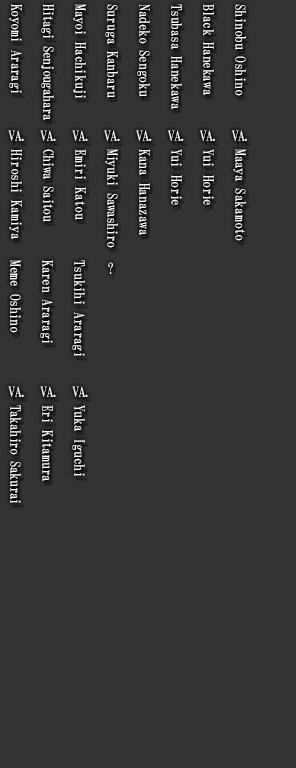
<style>
.page{position:relative;width:296px;height:768px;background:#333333}
.page>*{position:absolute;margin:0}
.t1{font:14px/32px "HGMinchoB";letter-spacing:-0.025em;color:#ffffff}
.t2{font:14px/32px "HGMinchoB";letter-spacing:-0.05em;color:#ffffff}
.t3{font:14px/44px "HGMinchoB";letter-spacing:-0.05em;color:#ffffff}
.t4{font:14px "HGMinchoB";letter-spacing:-0.05em;color:#ffffff}
.t5{font:14px/32px "HGMinchoB";letter-spacing:-0.045em;color:#ffffff}
</style>
<div class="page">
<p class="t1" style="left:9px;top:4px;width:237px;height:116px;rotate:90deg">Shinobu Oshino<br>Black Hanekawa<br>Tsubasa Hanekawa<br>Nadeko Sengoku<br>Suruga Kanbaru<br>Mayoi Hachikuji<br><span class="t2">Hitagi Senjougahara<br></span>Koyomi Araragi</p>
<p class="t3" style="left:8px;top:130px;width:239px;height:144px">VA. VA. VA. VA. VA. VA. VA. VA.<br><br>   <br>                ?</p>
<p class="t1" style="left:9px;top:149px;width:237px;height:99px;rotate:90deg">Maaya Sakamoto<br>Yui Horie<br>Yui Horie<br>Kana Hanazawa<br><span class="t2">Miyuki Sawashiro<br></span>Emiri Katou<br><span class="t2">Chiwa Saitou<br></span>Hiroshi Kamiya</p>
<p class="t1" style="left:10px;top:260px;width:75px;height:96px;rotate:90deg">Tsukihi Araragi<br>Karen Araragi<br>Meme Oshino</p>
<p class="t4" style="left:8px;top:386px;width:80px;height:11px">VA. VA. VA.</p>
<p class="t1" style="left:10px;top:405px;width:75px;height:98px;rotate:90deg">Yuka Iguchi<br>Eri Kitamura<br><span class="t5">Takahiro Sakurai</span></p>
</div>
